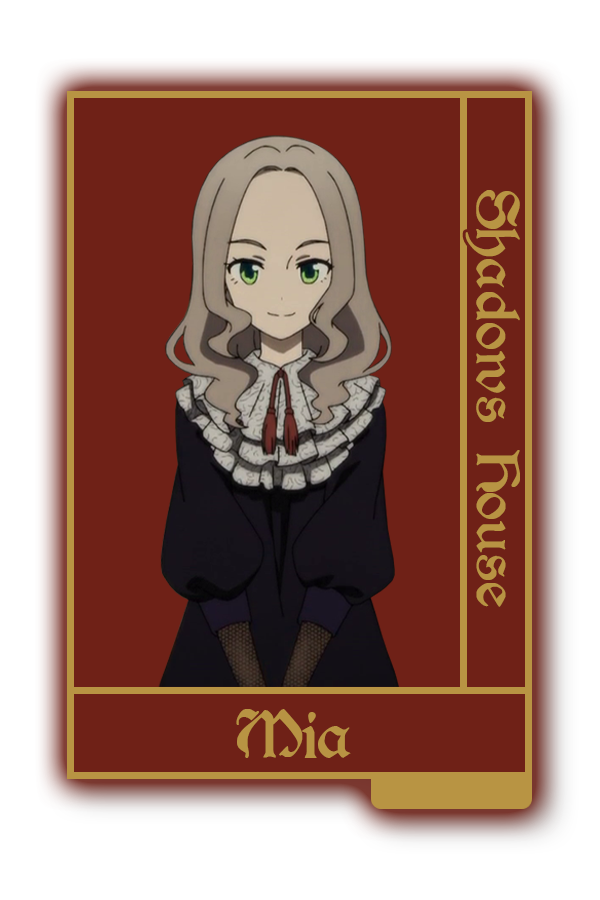
<style>
.page{position:relative;width:600px;height:900px;background:#6f2117}
.page>*{position:absolute;margin:0}
.t1{font:67.9px "Augusta-Regular";color:#b89443}
.t2{font:75px "Augusta-Regular";color:#b89443}
</style>
<div class="page">
<p class="t1" style="left:465px;top:190px;width:55px;height:417px;rotate:90deg">Shadows House</p>
<p class="t2" style="left:236px;top:709px;width:115px;height:49px">Mia</p>
</div>
